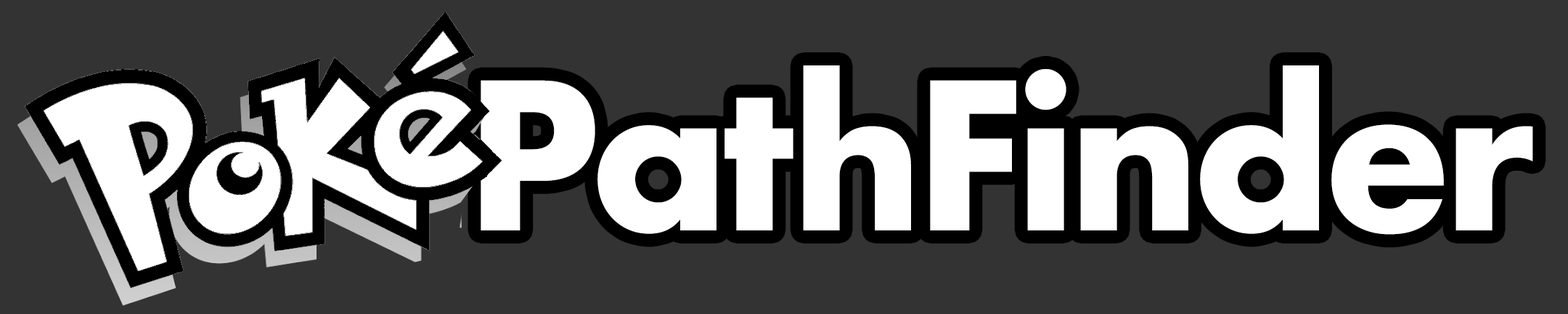
<style>
.page{position:relative;width:1568px;height:314px;background:#333333}
.page>*{position:absolute;margin:0}
.t1{font:198.4px "Futura-Bold";letter-spacing:-0.04em;color:#ffffff}
</style>
<div class="page">
<p class="t1" style="left:481px;top:65px;width:1052px;height:169px">PathFinder</p>
</div>
